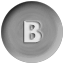
<style>
.page{position:relative;width:64px;height:64px;background:#ffffff}
.page>*{position:absolute;margin:0}
.t1{font:30px "StoneSansITC-Bold";color:#e2e2e2}
</style>
<div class="page">
<p class="t1" style="left:24px;top:21px;width:18px;height:22px">B</p>
</div>
